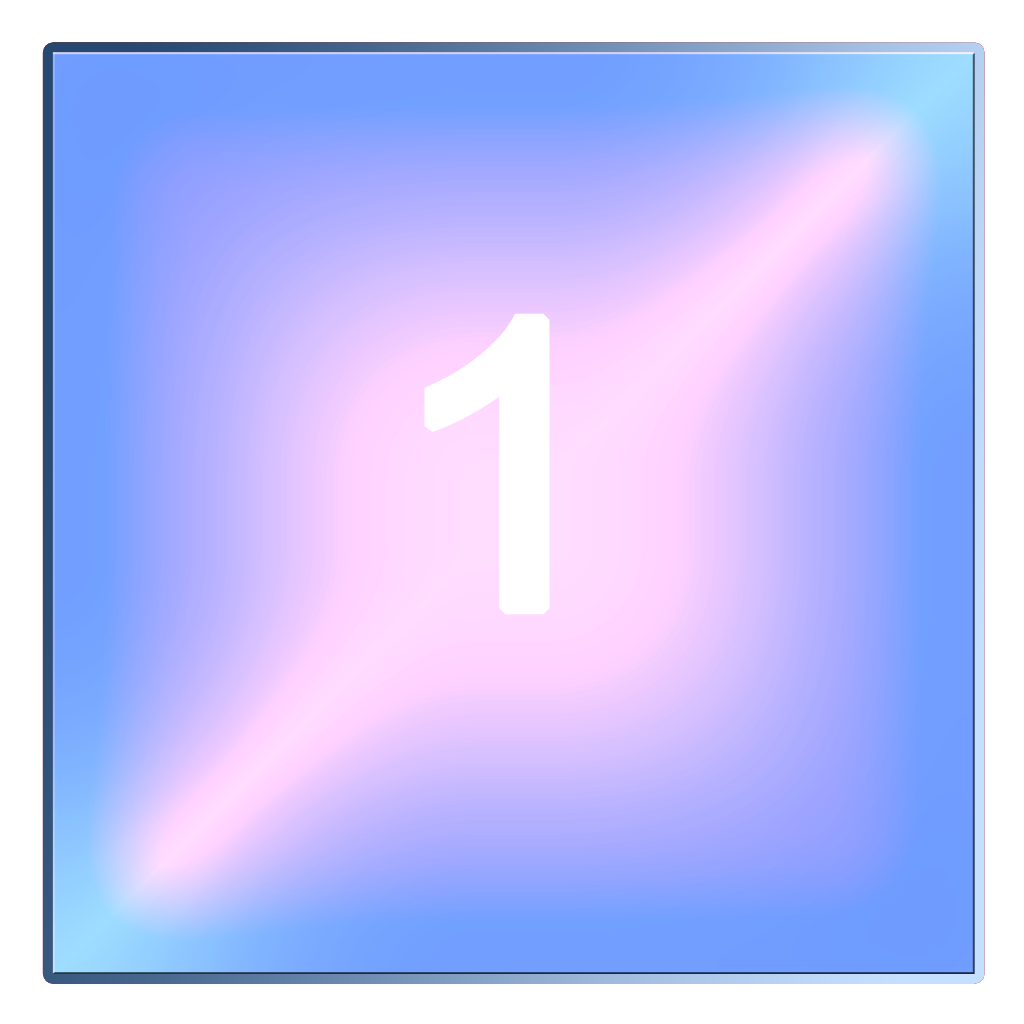
<style>
.page{position:relative;width:1024px;height:1024px}
.page>*{position:absolute;margin:0}
.t1{font:400px "ArialNarrow";color:#ffffff;font-weight:bold;scale:1.3 1}
</style>
<div class="page">
<p class="t1" style="left:424px;top:313px;width:126px;height:302px">1</p>
</div>
